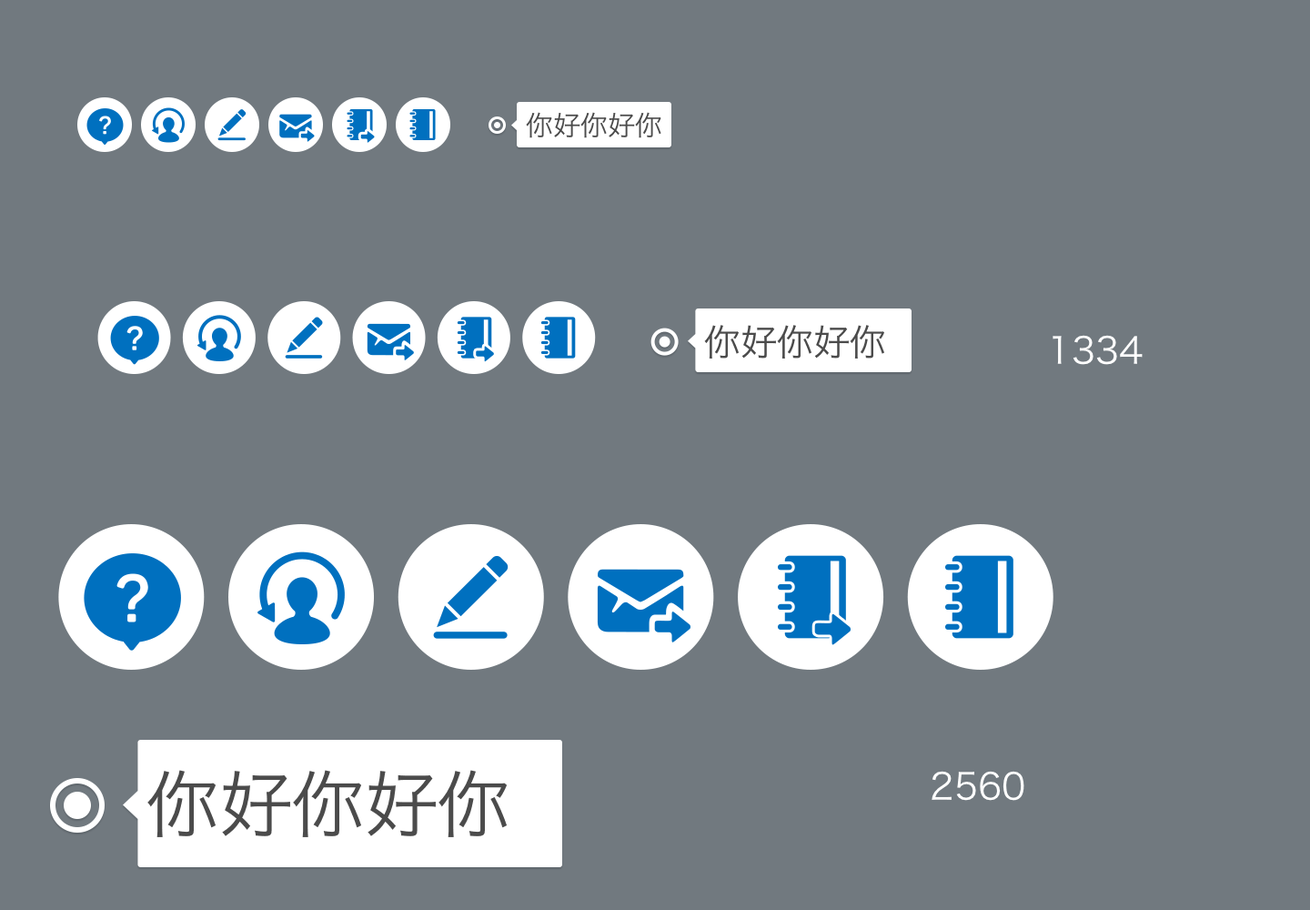
<style>
.page{position:relative;width:1310px;height:910px;background:#71797f}
.page>*{position:absolute;margin:0}
.t1{font:27.3px "HiraginoSansGB-W3";color:#4b4b4b}
.t2{font:36.4px "HiraginoSansGB-W3";color:#4b4b4b}
.t3{font:36.4px "HiraginoSansGB-W3";color:#ffffff}
.t4{font:72.8px "HiraginoSansGB-W3";color:#4b4b4b}
</style>
<div class="page">
<p class="t1" style="left:526px;top:112px;width:136px;height:26px">你好你好你</p>
<p class="t2" style="left:704px;top:325px;width:181px;height:34px">你好你好你</p>
<p class="t3" style="left:1053px;top:335px;width:90px;height:30px">1334</p>
<p class="t4" style="left:147px;top:770px;width:360px;height:67px">你好你好你</p>
<p class="t3" style="left:932px;top:771px;width:93px;height:30px">2560</p>
</div>
